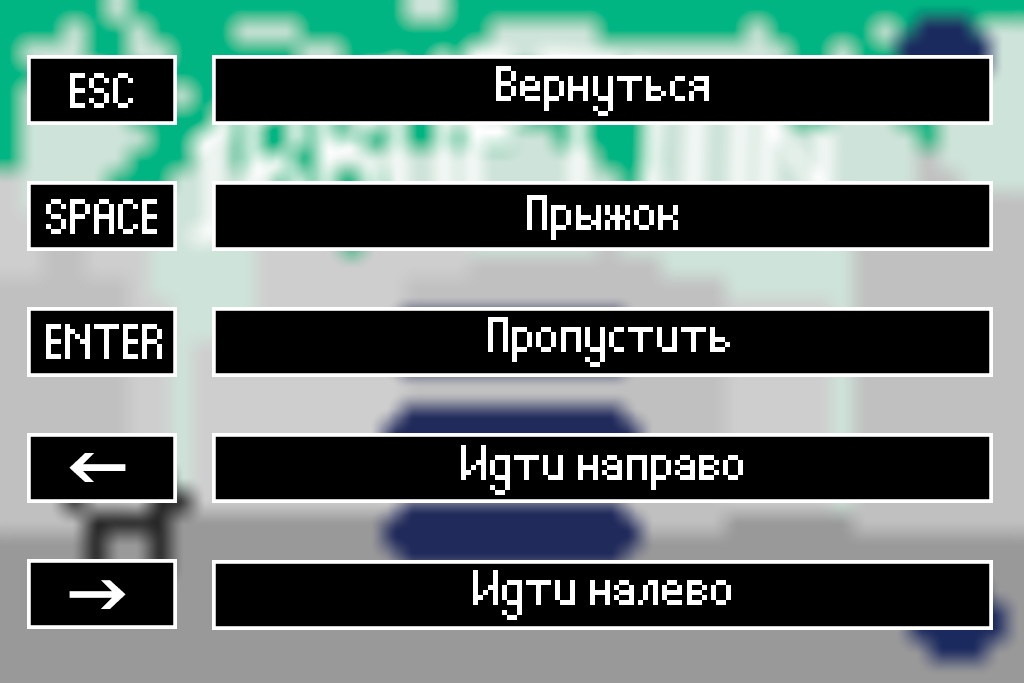
<style>
.page{position:relative;width:1024px;height:683px;background:#000000}
.page>*{position:absolute;margin:0}
.t1{font:80px "Thintel";color:#ffffff}
</style>
<div class="page">
<p class="t1" style="left:70px;top:73px;width:63px;height:35px">ESC</p>
<p class="t1" style="left:496px;top:66px;width:213px;height:50px">Вернуться</p>
<p class="t1" style="left:527px;top:195px;width:151px;height:45px">Прыжок</p>
<p class="t1" style="left:46px;top:199px;width:111px;height:35px">SPACE</p>
<p class="t1" style="left:488px;top:317px;width:242px;height:50px">Пропустить</p>
<p class="t1" style="left:46px;top:324px;width:116px;height:35px">ENTER</p>
<p class="t1" style="left:461px;top:445px;width:282px;height:50px">Идти направо</p>
<p class="t1" style="left:473px;top:570px;width:258px;height:50px">Идти налево</p>
</div>
